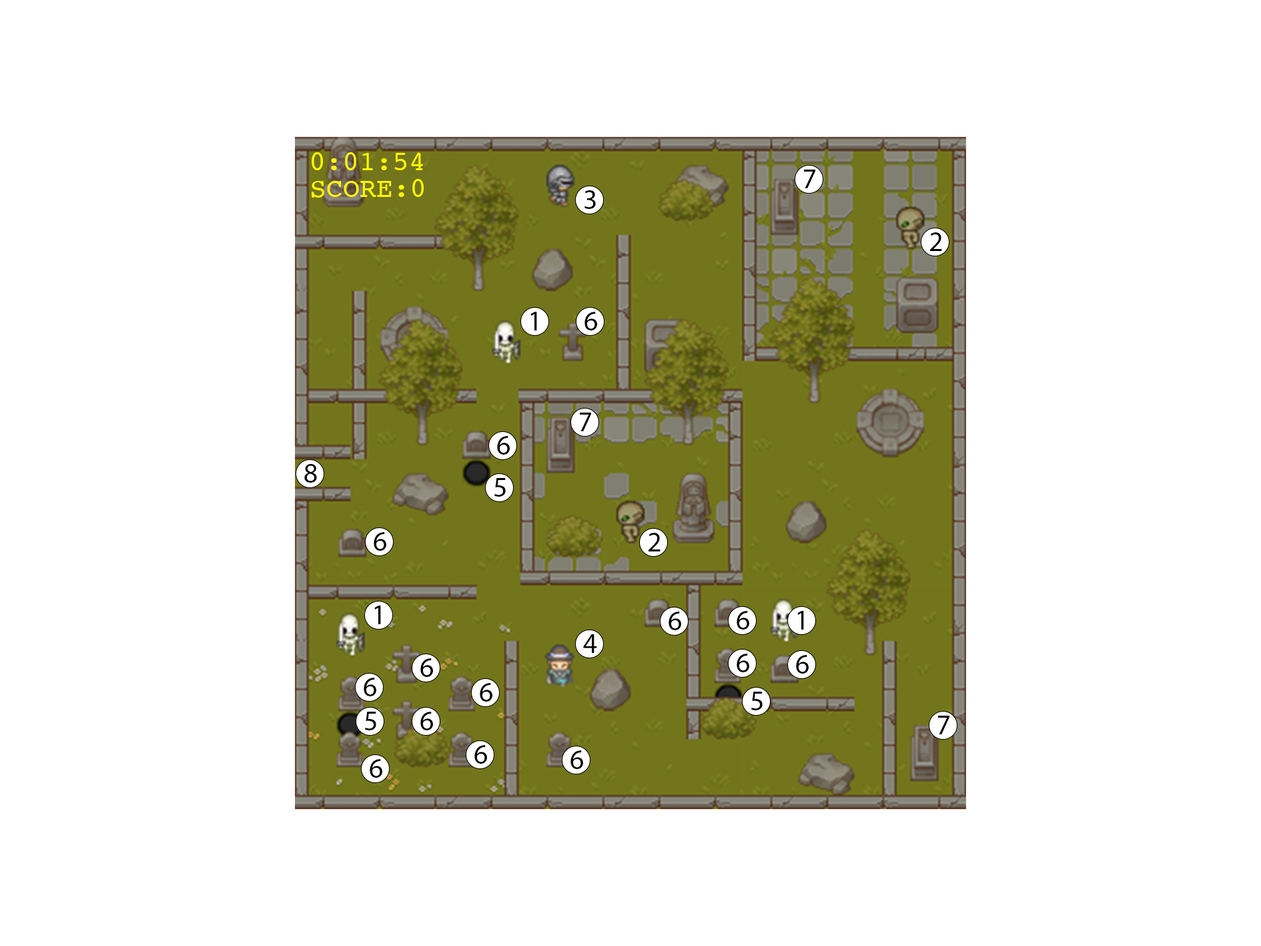
<style>
.page{position:relative;width:1261px;height:946px;background:#ffffff}
.page>*{position:absolute;margin:0}
.t1{font:27.8px "Courier";color:#fff600}
.t2{font:27.8px "MyriadPro-Regular";color:#000000}
</style>
<div class="page">
<p class="t1" style="left:312px;top:152px;width:111px;height:18px">0:01:54</p>
<p class="t2" style="left:804px;top:169px;width:11px;height:19px">7</p>
<p class="t1" style="left:311px;top:179px;width:113px;height:19px">SCORE:0</p>
<p class="t2" style="left:585px;top:190px;width:11px;height:19px">3</p>
<p class="t2" style="left:930px;top:232px;width:12px;height:19px">2</p>
<p class="t2" style="left:530px;top:312px;width:7px;height:18px">1</p>
<p class="t2" style="left:585px;top:312px;width:12px;height:18px">6</p>
<p class="t2" style="left:580px;top:412px;width:11px;height:19px">7</p>
<p class="t2" style="left:497px;top:436px;width:13px;height:18px">6</p>
<p class="t2" style="left:304px;top:464px;width:13px;height:18px">8</p>
<p class="t2" style="left:494px;top:478px;width:12px;height:18px">5</p>
<p class="t2" style="left:374px;top:532px;width:12px;height:18px">6</p>
<p class="t2" style="left:649px;top:532px;width:12px;height:19px">2</p>
<p class="t2" style="left:374px;top:605px;width:7px;height:19px">1</p>
<p class="t2" style="left:669px;top:611px;width:12px;height:19px">6</p>
<p class="t2" style="left:737px;top:611px;width:12px;height:18px">6</p>
<p class="t2" style="left:797px;top:611px;width:7px;height:18px">1</p>
<p class="t2" style="left:583px;top:634px;width:14px;height:19px">4</p>
<p class="t2" style="left:737px;top:653px;width:12px;height:19px">6</p>
<p class="t2" style="left:420px;top:658px;width:13px;height:19px">6</p>
<p class="t2" style="left:796px;top:655px;width:13px;height:18px">6</p>
<p class="t2" style="left:364px;top:677px;width:12px;height:19px">6</p>
<p class="t2" style="left:480px;top:683px;width:12px;height:18px">6</p>
<p class="t2" style="left:751px;top:691px;width:12px;height:19px">5</p>
<p class="t2" style="left:365px;top:711px;width:11px;height:19px">5</p>
<p class="t2" style="left:420px;top:711px;width:13px;height:19px">6</p>
<p class="t2" style="left:938px;top:715px;width:12px;height:19px">7</p>
<p class="t2" style="left:474px;top:745px;width:13px;height:18px">6</p>
<p class="t2" style="left:370px;top:759px;width:12px;height:18px">6</p>
<p class="t2" style="left:571px;top:750px;width:12px;height:19px">6</p>
</div>
